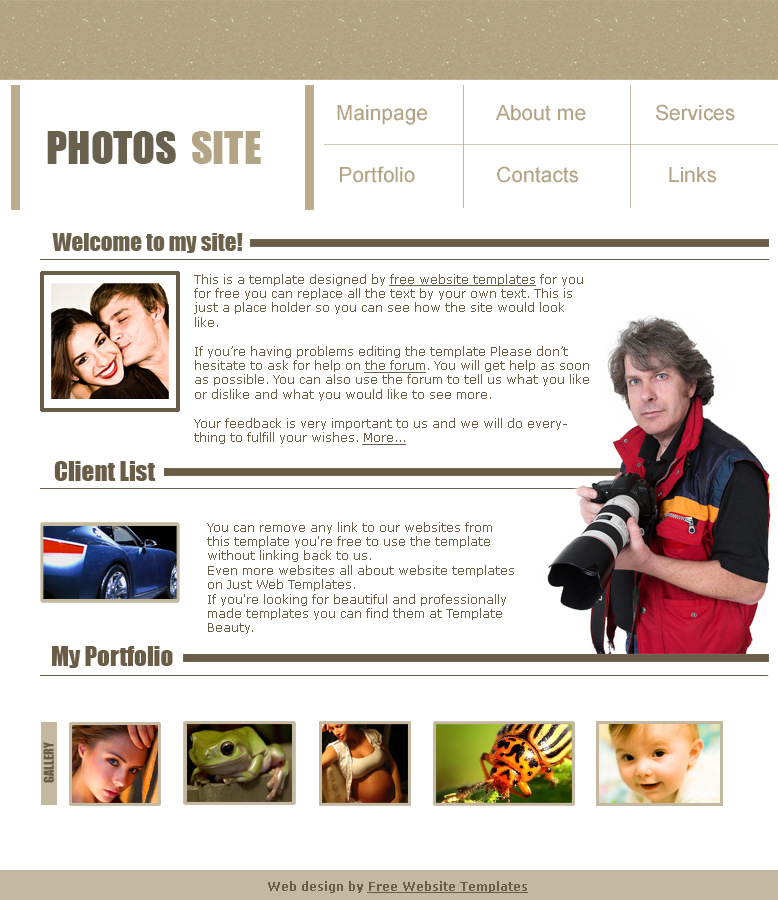
<style>
.page{position:relative;width:778px;height:900px;background:#ffffff}
.page>*{position:absolute;margin:0}
.t1{font:20.8px "Small Fonts";color:#b3a386}
.t2{font:41.7px "Impact";color:#6a604e}
.t3{font:41.7px "Impact";color:#b3a486}
.t4{font:22.9px "Impact";color:#6c614b}
.t5{font:12px "Verdana";color:#695d47}
.t6{font:12px "Verdana";color:#695d47;text-decoration:underline}
.t7{font:25px "Impact";color:#695d47}
.t8{font:12.5px "Impact";color:#695d47}
.t9{font:12px "Verdana-Bold";color:#695d47;text-decoration:underline}
.t10{font:12px "Verdana-Bold";color:#695d47}
</style>
<div class="page">
<p class="t1" style="left:337px;top:105px;width:91px;height:20px">Mainpage</p>
<p class="t1" style="left:496px;top:105px;width:90px;height:16px">About me</p>
<p class="t1" style="left:655px;top:104px;width:80px;height:17px">Services</p>
<p class="t2" style="left:47px;top:131px;width:214px;height:33px">PHOTOS  <span class="t3">SITE</span></p>
<p class="t1" style="left:339px;top:166px;width:76px;height:17px">Portfolio</p>
<p class="t1" style="left:497px;top:166px;width:82px;height:17px">Contacts</p>
<p class="t1" style="left:669px;top:167px;width:48px;height:16px">Links</p>
<p class="t4" style="left:52px;top:233px;width:191px;height:20px">Welcome to my site!</p>
<p class="t5" style="left:194px;top:274px;width:395px;height:171px">This is a template designed by <span class="t6">free website templates</span> for you for free you can replace all the text by your own text. This is just a place holder so you can see how the site would look like. <br><br>If you’re having problems editing the template Please don’t hesitate to ask for help on <span class="t6">the forum</span>. You will get help as soon as possible. You can also use the forum to tell us what you like or dislike and what you would like to see more. <br><br>Your feedback is very important to us and we will do everything to fulfill your wishes. <span class="t6">More...</span></p>
<p class="t7" style="left:54px;top:461px;width:102px;height:20px">Client List</p>
<p class="t5" style="left:207px;top:522px;width:307px;height:112px">You can remove any link to our websites from this template you're free to use the template without linking back to us. <br>Even more websites all about website templates on Just Web Templates.<br>If you're looking for beautiful and professionally made templates you can find them at Template Beauty.</p>
<p class="t7" style="left:52px;top:646px;width:121px;height:22px">My Portfolio</p>
<p class="t8" style="left:43px;top:742px;width:11px;height:41px;rotate:-90deg">GALLERY</p>
<p class="t9" style="left:268px;top:881px;width:260px;height:12px"><span class="t10">Web design by </span>Free Website Templates</p>
</div>
